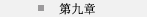
<style>
.page{position:relative;width:147px;height:17px;background:#f1f1f1}
.page>*{position:absolute;margin:0}
.t1{font:12px "SimSun";color:#000000;font-weight:bold}
</style>
<div class="page">
<p class="t1" style="left:39px;top:0px;width:77px;height:18px">第九章</p>
</div>
